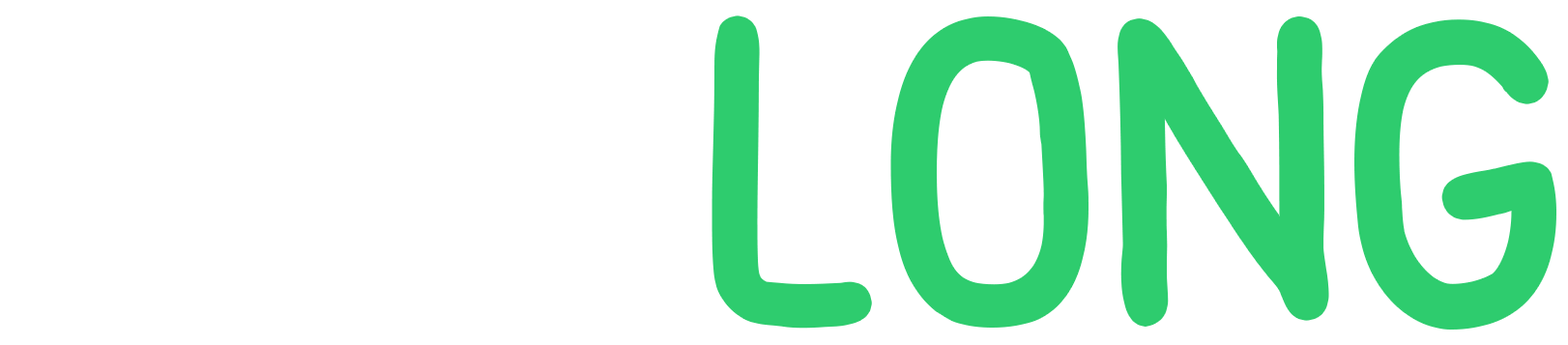
<style>
.page{position:relative;width:1568px;height:345px;background:#ffffff}
.page>*{position:absolute;margin:0}
.t1{font:604.2px "WaffleRegular";color:#2ecc6e}
.t2{font:604.2px "WaffleRegular";color:#2e3641}
</style>
<div class="page">
<p class="t1" style="left:721px;top:25px;width:826px;height:296px"><span class="t2">     </span>LONG</p>
</div>
